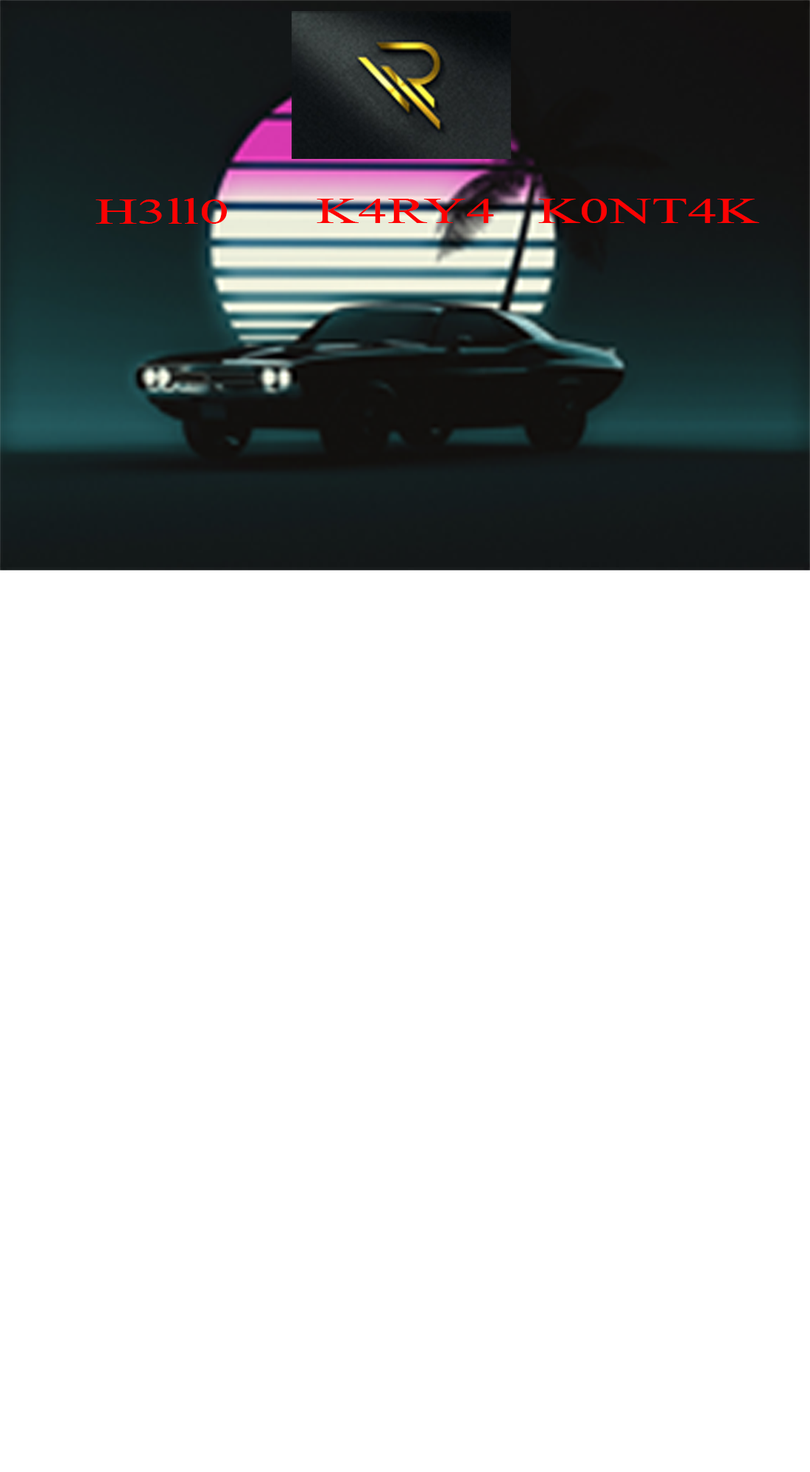
<style>
.page{position:relative;width:810px;height:1472px;background:#ffffff}
.page>*{position:absolute;margin:0}
.t1{font:36.8px "TimesNewRomanPSMT";color:#fd0202;scale:1.6 1}
</style>
<div class="page">
<p class="t1" style="left:96px;top:198px;width:131px;height:26px">H3ll0</p>
<p class="t1" style="left:317px;top:199px;width:177px;height:24px">K4RY4</p>
<p class="t1" style="left:538px;top:199px;width:221px;height:25px">K0NT4K</p>
</div>
